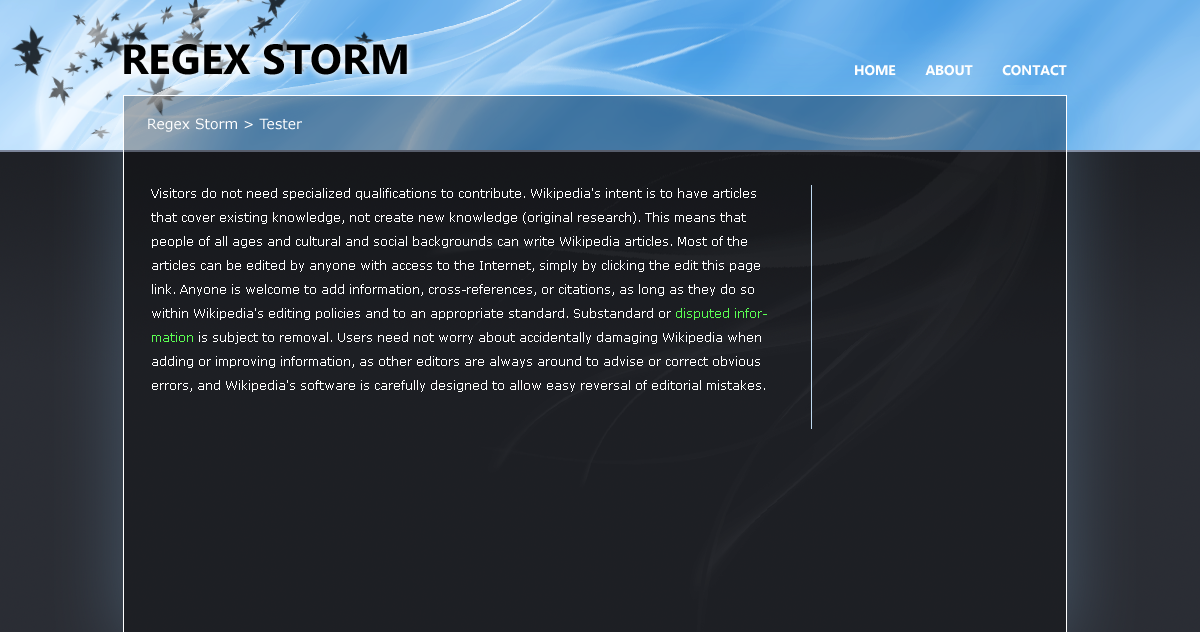
<style>
.page{position:relative;width:1200px;height:632px;background:#1d1f24}
.page>*{position:absolute;margin:0}
.t1{font:42px "Ebrima-Bold";color:#000000;text-transform:uppercase}
.t2{font:14px "MicrosoftNewTaiLue-Bold";letter-spacing:-0.01em;color:#ffffff;text-transform:uppercase}
.t3{font:14px "Verdana";color:#ffffff}
.t4{font:12px/24px "Verdana";color:#ffffff}
.t5{font:12px/24px "Verdana";color:#5bff53}
</style>
<div class="page">
<p class="t1" style="left:124px;top:44px;width:283px;height:31px">Regex Storm</p>
<p class="t2" style="left:855px;top:65px;width:212px;height:11px">Home        About        Contact</p>
<p class="t3" style="left:148px;top:118px;width:154px;height:14px">Regex Storm &gt; Tester</p>
<p class="t4" style="left:151px;top:188px;width:616px;height:204px">Visitors do not need specialized qualifications to contribute. Wikipedia's intent is to have articles that cover existing knowledge, not create new knowledge (original research). This means that people of all ages and cultural and social backgrounds can write Wikipedia articles. Most of the articles can be edited by anyone with access to the Internet, simply by clicking the edit this page link. Anyone is welcome to add information, cross-references, or citations, as long as they do so within Wikipedia's editing policies and to an appropriate standard. Substandard or <span class="t5">disputed information</span> is subject to removal. Users need not worry about accidentally damaging Wikipedia when adding or improving information, as other editors are always around to advise or correct obvious errors, and Wikipedia's software is carefully designed to allow easy reversal of editorial mistakes.</p>
</div>
